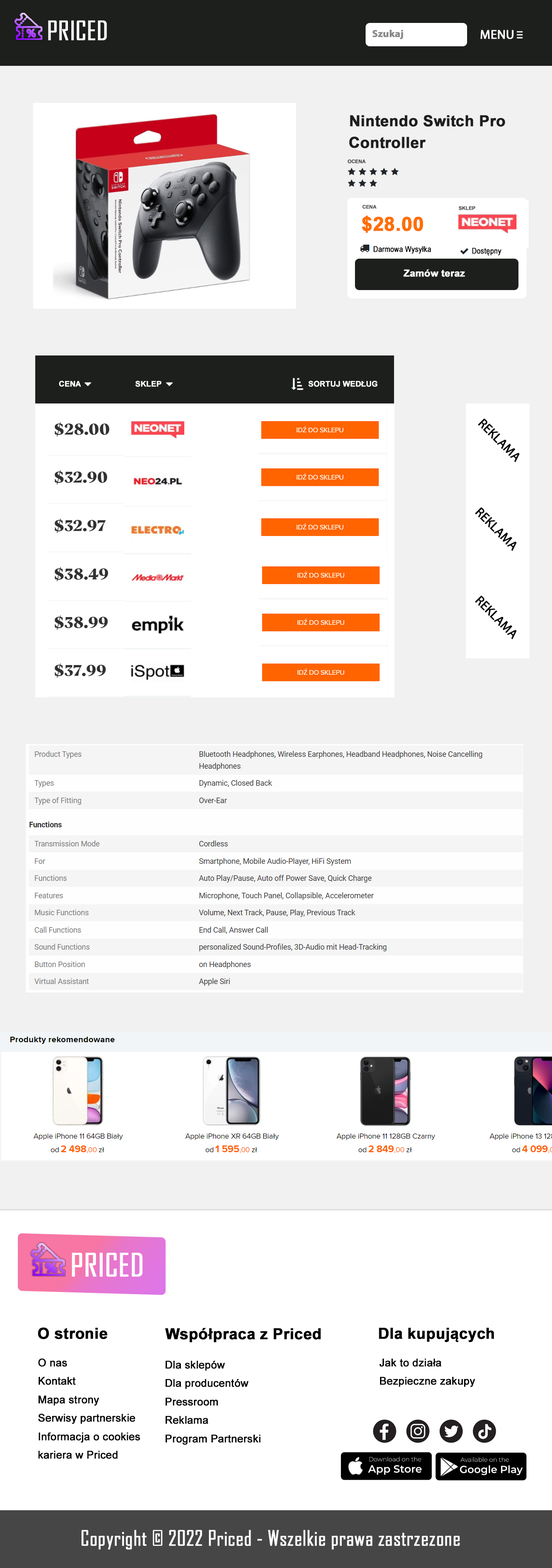
<style>
.page{position:relative;width:552px;height:1568px;background:#ffffff}
.page>*{position:absolute;margin:0}
.t1{font:25.4px "AgencyFB-Reg";color:#ffffff;font-weight:bold}
.t2{font:10.2px "MyriadPro-Bold";color:#888888;font-weight:bold}
.t3{font:12.7px "MyriadPro-Regular";color:#ffffff;font-weight:bold}
.t4{font:10.2px "MyriadPro-Bold";color:#ffffff;font-weight:bold;scale:1.93 1}
.t5{font:15.2px "Arial-BoldMT";color:#1d1f1d;font-weight:bold}
.t6{font:4.8px "Arial-BoldMT";color:#454545;font-weight:bold}
.t7{font:19.4px "Arial-BoldMT";color:#ff6d02;font-weight:bold}
.t8{font:8.1px "ArialNarrow";color:#000000;font-weight:bold}
.t9{font:9.7px "Arial-BoldMT";color:#ffffff;font-weight:bold}
.t10{font:7.6px "Arial-BoldMT";color:#fefefe;font-weight:bold}
.t11{font:12.7px "MyriadPro-Regular";color:#000000;font-weight:bold}
.t12{font:30.7px "AgencyFB-Reg";color:#ffffff;font-weight:bold}
.t13{font:15.2px "Arial-BoldMT";color:#000000;font-weight:bold}
.t14{font:10.6px "ArialMT";color:#000000;font-weight:bold}
.t15{font:20.3px "AgencyFB-Reg";color:#ffffff;font-weight:bold}
</style>
<div class="page">
<p class="t1" style="left:48px;top:20px;width:59px;height:20px">PRICED</p>
<p class="t2" style="left:372px;top:30px;width:31px;height:9px">Szukaj</p>
<p class="t3" style="left:480px;top:30px;width:34px;height:9px">MENU</p>
<p class="t4" style="left:517px;top:31px;width:6px;height:2px">-</p>
<p class="t4" style="left:517px;top:34px;width:6px;height:2px">-</p>
<p class="t4" style="left:517px;top:37px;width:6px;height:2px">-</p>
<p class="t5" style="left:350px;top:115px;width:155px;height:12px">Nintendo Switch Pro</p>
<p class="t5" style="left:349px;top:136px;width:77px;height:12px">Controller</p>
<p class="t6" style="left:348px;top:159px;width:18px;height:5px">OCENA</p>
<p class="t6" style="left:362px;top:205px;width:15px;height:4px">CENA</p>
<p class="t6" style="left:459px;top:206px;width:17px;height:4px">SKLEP</p>
<p class="t7" style="left:362px;top:215px;width:61px;height:18px">$28.00</p>
<p class="t8" style="left:374px;top:246px;width:57px;height:8px">Darmowa Wysyłka</p>
<p class="t8" style="left:472px;top:248px;width:30px;height:8px">Dostępny</p>
<p class="t9" style="left:403px;top:269px;width:62px;height:8px">Zamów teraz</p>
<p class="t10" style="left:59px;top:381px;width:22px;height:6px">CENA</p>
<p class="t10" style="left:135px;top:381px;width:26px;height:6px">SKLEP</p>
<p class="t10" style="left:308px;top:381px;width:70px;height:6px">SORTUJ WEDŁUG</p>
<p class="t11" style="left:478px;top:418px;width:42px;height:44px;rotate:45deg">REKLAMA</p>
<p class="t11" style="left:475px;top:507px;width:42px;height:44px;rotate:45deg">REKLAMA</p>
<p class="t11" style="left:475px;top:595px;width:42px;height:44px;rotate:45deg">REKLAMA</p>
<p class="t12" style="left:72px;top:1252px;width:71px;height:25px">PRICED</p>
<p class="t13" style="left:38px;top:1327px;width:69px;height:12px">O stronie</p>
<p class="t13" style="left:165px;top:1328px;width:156px;height:14px">Współpraca z Priced</p>
<p class="t13" style="left:379px;top:1328px;width:115px;height:14px">Dla kupujących</p>
<p class="t14" style="left:38px;top:1358px;width:102px;height:101px">O nas<br>Kontakt<br>Mapa strony<br>Serwisy partnerskie<br>Informacja o cookies<br>kariera w Priced</p>
<p class="t14" style="left:166px;top:1361px;width:95px;height:84px">Dla sklepów<br>Dla producentów<br>Pressroom<br>Reklama<br>Program Partnerski</p>
<p class="t14" style="left:379px;top:1359px;width:96px;height:28px">Jak to działa<br>Bezpieczne zakupy</p>
<p class="t15" style="left:82px;top:1530px;width:378px;height:20px">Copyright © 2022 Priced - Wszelkie prawa zastrzezone</p>
</div>
